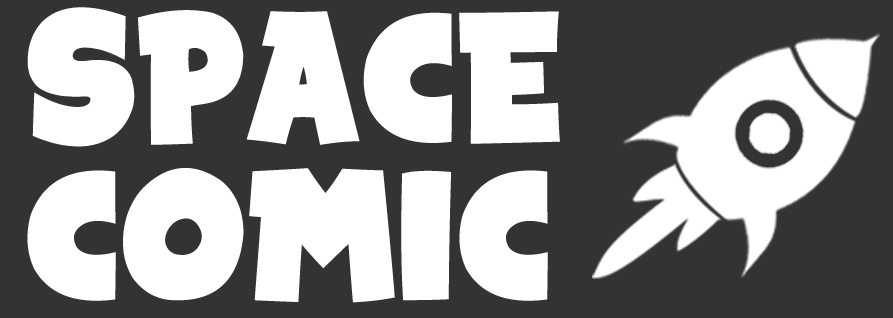
<style>
.page{position:relative;width:893px;height:318px;background:#333333}
.page>*{position:absolute;margin:0}
.t1{font:100.1px/157.6px "SpaceComics";color:#ffffff;scale:0.96 1}
</style>
<div class="page">
<p class="t1" style="left:27px;top:7px;width:533px;height:296px">SPACE <br>COMIC</p>
</div>
